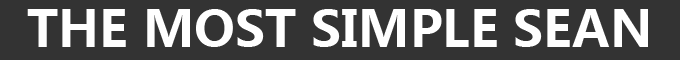
<style>
.page{position:relative;width:680px;height:60px;background:#333333}
.page>*{position:absolute;margin:0}
.t1{font:50px "MicrosoftYaHei-Bold";color:#ffffff}
</style>
<div class="page">
<p class="t1" style="left:27px;top:9px;width:621px;height:38px">THE MOST SIMPLE SEAN</p>
</div>
